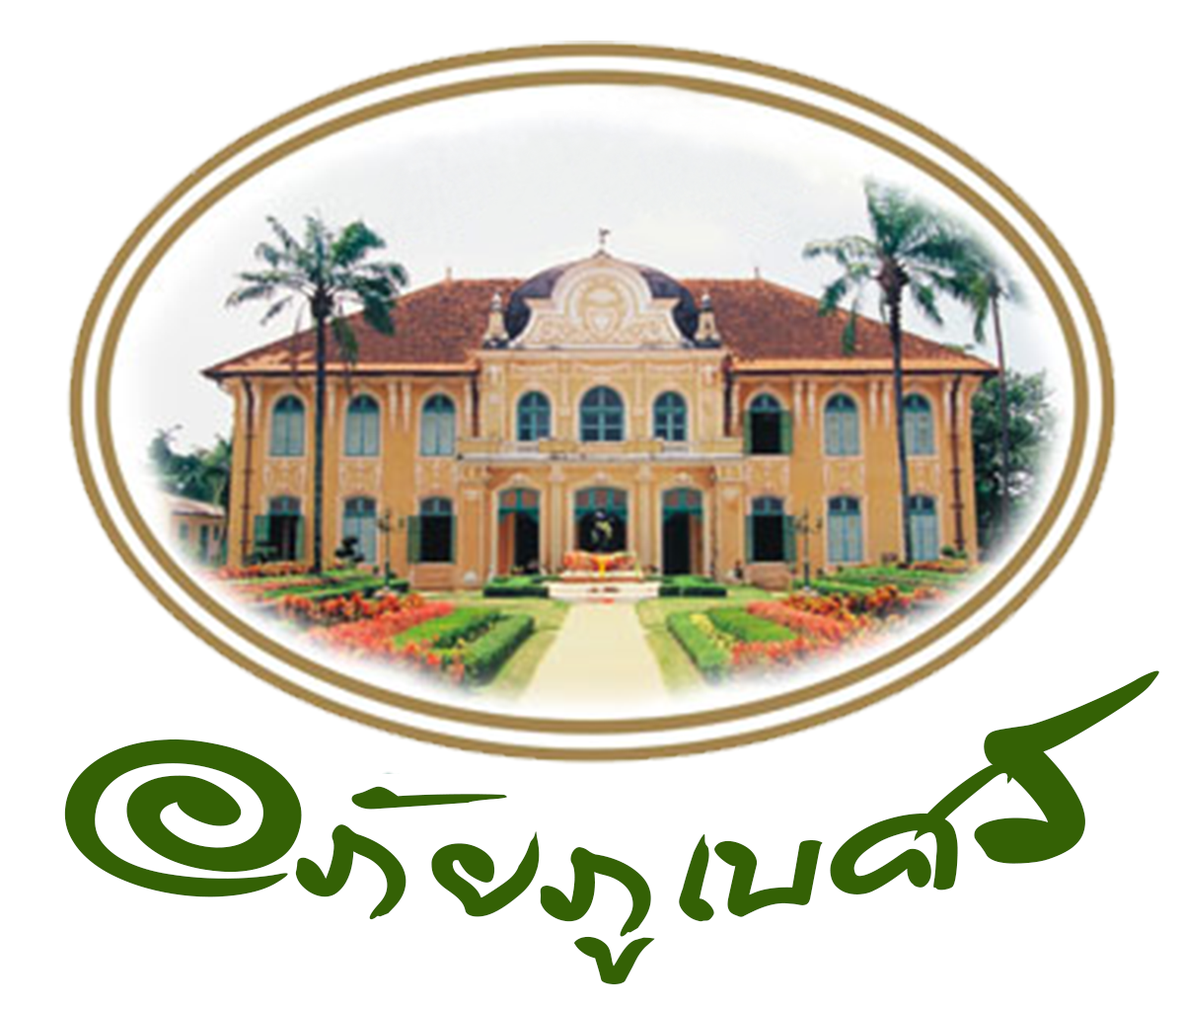
<style>
.page{position:relative;width:1182px;height:1009px;background:#ffffff}
.page>*{position:absolute;margin:0}
.t1{font:260.4px "ktsmarnseree";color:#346105}
.t2{font:433.1px "ktsmarnseree";color:#346105}
.t3{font:483.8px "ktsmarnseree";color:#346105}
</style>
<div class="page">
<p class="t1" style="left:64px;top:670px;width:1096px;height:314px"><span class="t2">อ</span>ภัยภูเบศ<span class="t3">ร</span></p>
</div>
